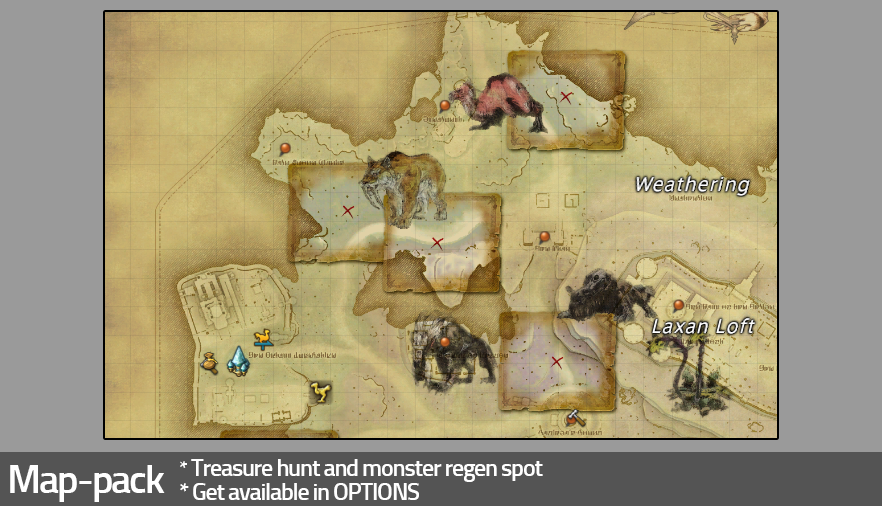
<style>
.page{position:relative;width:882px;height:506px;background:#9a9a9a}
.page>*{position:absolute;margin:0}
.t1{font:24px/24px "Titillium-Semibold";letter-spacing:-0.05em;color:#ffffff}
.t2{font:21.3px/24px "Titillium-Semibold";letter-spacing:-0.05em;color:#ffffff}
.t3{font:40px "Titillium-Semibold";letter-spacing:-0.05em;color:#ffffff}
</style>
<div class="page">
<p class="t1" style="left:180px;top:459px;width:363px;height:41px"><span class="t2">*</span> Treasure hunt and monster regen spot<br>* Get available in OPTIONS</p>
<p class="t3" style="left:10px;top:465px;width:155px;height:37px">Map-pack</p>
</div>
